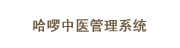
<style>
.page{position:relative;width:180px;height:48px;background:#ffffff}
.page>*{position:absolute;margin:0}
.t1{font:14px "SimHei";color:#705e44;font-weight:bold}
</style>
<div class="page">
<p class="t1" style="left:33px;top:18px;width:114px;height:14px">哈啰中医管理系统</p>
</div>
